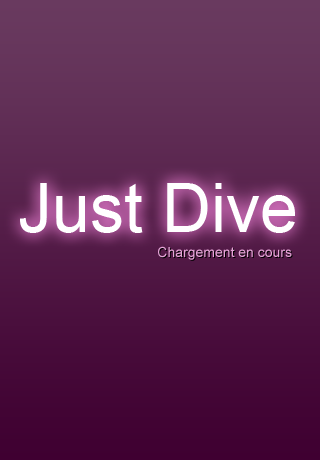
<style>
.page{position:relative;width:320px;height:460px}
.page>*{position:absolute;margin:0}
.t1{font:68px "ArialMT";color:#ffffff}
.t2{font:14px "ArialMT";color:#e4a4d6}
</style>
<div class="page">
<p class="t1" style="left:20px;top:183px;width:275px;height:50px">Just Dive</p>
<p class="t2" style="left:158px;top:246px;width:134px;height:14px">Chargement en cours</p>
</div>
